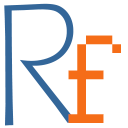
<style>
.page{position:relative;width:128px;height:128px;background:#ffffff}
.page>*{position:absolute;margin:0}
.t1{font:180px "ErasITC-Light";color:#336699}
.t2{font:140px "Courier";color:#f56d18}
</style>
<div class="page">
<p class="t1" style="left:4px;top:3px;width:74px;height:123px;rotate:-2deg">R</p>
<p class="t2" style="left:68px;top:35px;width:53px;height:88px">f</p>
</div>
